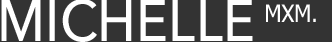
<style>
.page{position:relative;width:332px;height:42px;background:#333333}
.page>*{position:absolute;margin:0}
.t1{font:58px "AvenirNext-Medium";color:#ffffff;scale:0.92 1}
.t2{font:24px "Tahoma";color:#ffffff;scale:0.92 1}
</style>
<div class="page">
<p class="t1" style="left:1px;top:0px;width:252px;height:42px">MICHELLE</p>
<p class="t2" style="left:266px;top:4px;width:50px;height:18px">MXM.</p>
</div>
